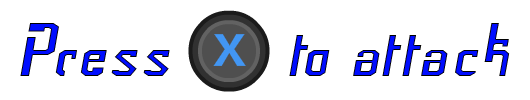
<style>
.page{position:relative;width:530px;height:100px;background:#ffffff}
.page>*{position:absolute;margin:0}
.t1{font:72px "Frak-Regular";color:#000dff}
.t2{font:72px "Frak-Regular"}
</style>
<div class="page">
<p class="t1" style="left:20px;top:23px;width:150px;height:53px">Press</p>
<p class="t2" style="left:289px;top:23px;width:221px;height:53px">to attack</p>
</div>
